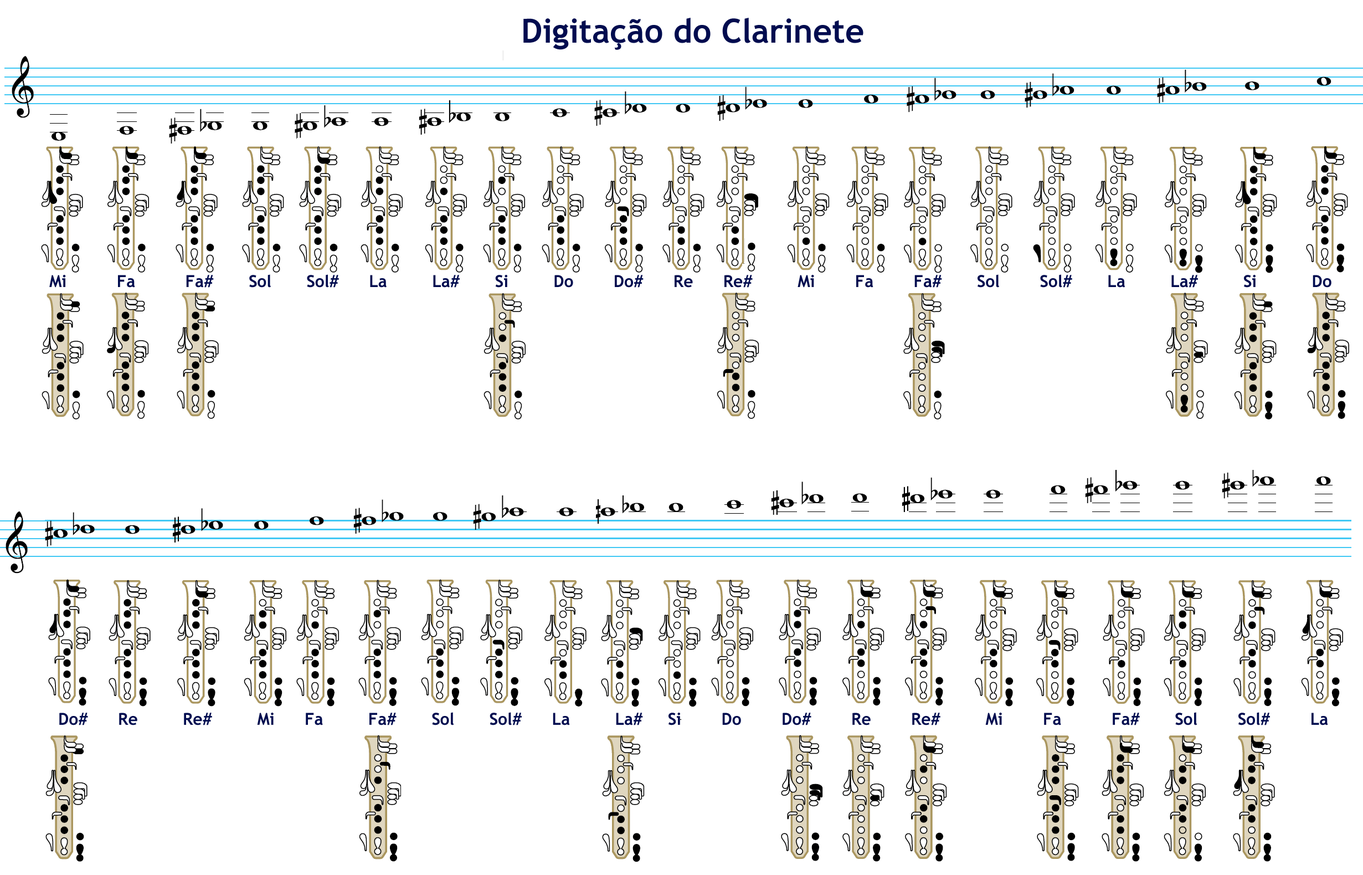
<style>
.page{position:relative;width:1363px;height:875px;background:#ffffff}
.page>*{position:absolute;margin:0}
.t1{font:33.2px "TrebuchetMS-Bold";color:#000c4f}
.t2{font:16.6px "TrebuchetMS-Bold";color:#000c4f}
</style>
<div class="page">
<p class="t1" style="left:523px;top:18px;width:341px;height:32px">Digitação do Clarinete</p>
<p class="t2" style="left:49px;top:274px;width:1283px;height:13px">Mi          Fa          Fa#       Sol       Sol#      La         La#       Si         Do        Do#      Re      Re#         Mi        Fa        Fa#       Sol        Sol#       La         La#         Si           Do</p>
<p class="t2" style="left:59px;top:712px;width:1269px;height:13px">Do#      Re         Re#         Mi      Fa         Fa#       Sol       Sol#      La         La#     Si        Do        Do#        Re        Re#         Mi        Fa          Fa#       Sol        Sol#        La</p>
</div>
